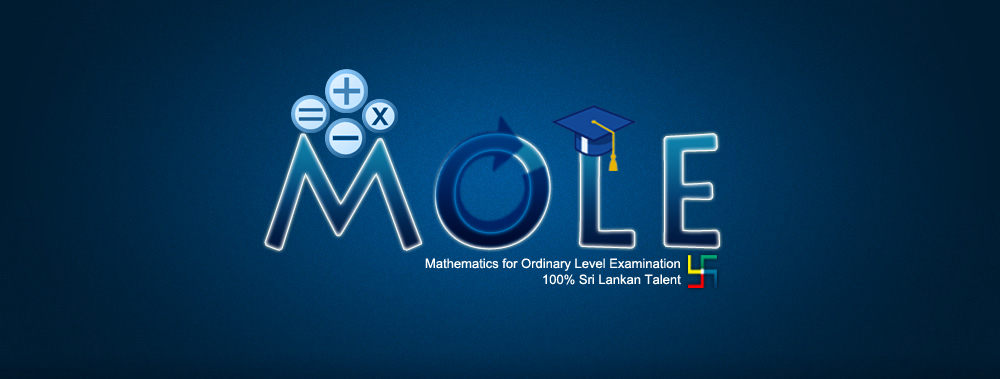
<style>
.page{position:relative;width:1000px;height:379px}
.page>*{position:absolute;margin:0}
.t1{font:13px "ArialMT";color:#ffffff}
</style>
<div class="page">
<p class="t1" style="left:425px;top:258px;width:255px;height:13px">Mathematics for Ordinary Level Examination</p>
<p class="t1" style="left:543px;top:274px;width:138px;height:11px">100% Sri Lankan Talent</p>
</div>
